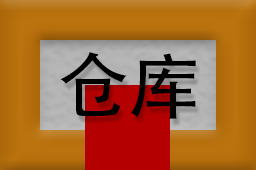
<style>
.page{position:relative;width:256px;height:170px}
.page>*{position:absolute;margin:0}
.t1{font:71px "AdobeHeitiStd-Regular";color:#000000}
</style>
<div class="page">
<p class="t1" style="left:60px;top:52px;width:136px;height:67px">仓库</p>
</div>
